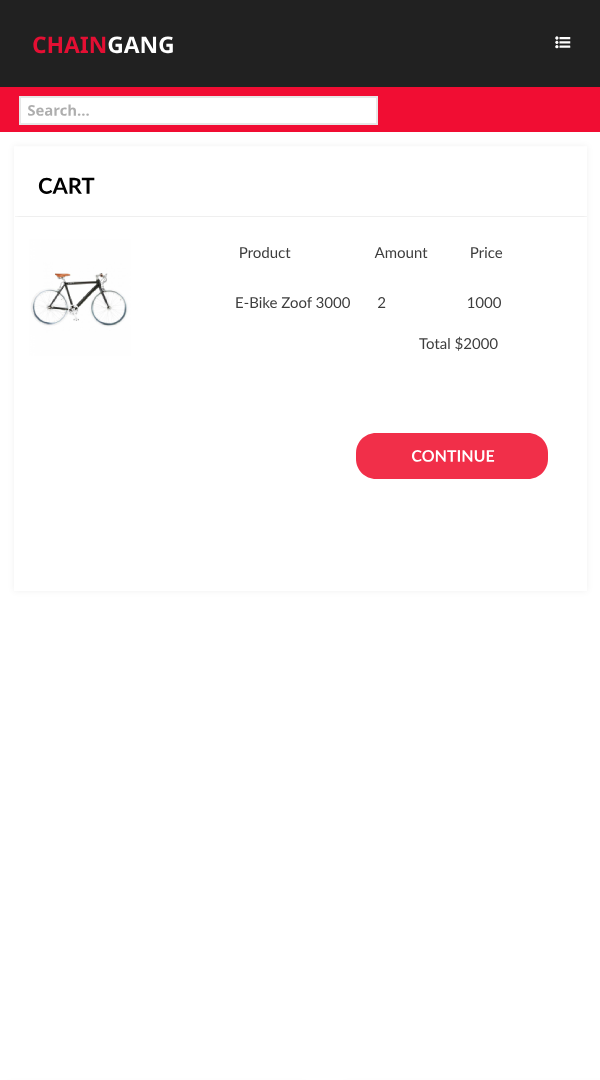
<style>
.page{position:relative;width:600px;height:1080px;background:#ffffff}
.page>*{position:absolute;margin:0}
.t1{font:22.8px "NotoSans-Bold";color:#e40f33}
.t2{font:22.8px "NotoSans-Bold";color:#ffffff}
.t3{font:14.8px "NotoSans-Bold";color:#aeaeae}
.t4{font:21.9px "Lato-Bold";color:#000000;text-transform:uppercase}
.t5{font:15px "Lato-Regular";color:#3d3d3d}
.t6{font:16px "Lato-Bold";color:#ffffff;text-transform:uppercase}
</style>
<div class="page">
<p class="t1" style="left:33px;top:36px;width:140px;height:18px">CHAIN<span class="t2">GANG</span></p>
<p class="t3" style="left:28px;top:104px;width:61px;height:12px">Search...</p>
<p class="t4" style="left:38px;top:177px;width:57px;height:17px">Cart</p>
<p class="t5" style="left:240px;top:246px;width:263px;height:13px">Product                      Amount           Price</p>
<p class="t5" style="left:236px;top:296px;width:265px;height:13px">E-Bike Zoof 3000       2                     1000</p>
<p class="t5" style="left:419px;top:336px;width:79px;height:15px">Total $2000</p>
<p class="t6" style="left:411px;top:450px;width:84px;height:12px">Continue</p>
</div>
